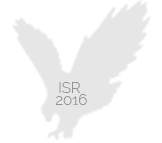
<style>
.page{position:relative;width:162px;height:143px;background:#ffffff}
.page>*{position:absolute;margin:0}
.t1{font:14.8px/12px "Raleway-Light";color:#939393}
</style>
<div class="page">
<p class="t1" style="left:55px;top:82px;width:32px;height:23px;text-align:center">ISR<br> 2016</p>
</div>
